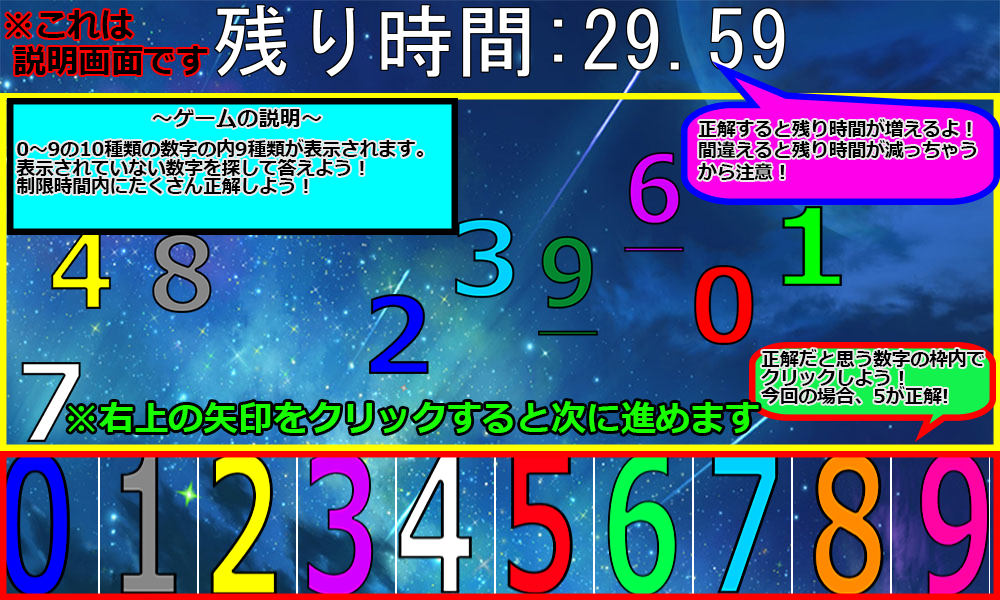
<style>
.page{position:relative;width:1000px;height:600px}
.page>*{position:absolute;margin:0}
.t1{font:32.6px/36px "Meiryo-Bold";color:#000000}
.t2{font:18.7px/18.7px "Meiryo-Bold";color:#000000}
.t3{font:21.3px/32px "Meiryo-Bold";color:#000000}
.t4{font:18.7px/21.3px "Meiryo-Bold";color:#000000}
.t5{font:34.8px "Meiryo-Bold";color:#18ff00}
</style>
<div class="page">
<p class="t1" style="left:6px;top:10px;width:202px;height:65px">※これは<br> 説明画面です</p>
<p class="t2" style="left:16px;top:109px;width:408px;height:85px;text-align:center"><span class="t3">～ゲームの説明～<br></span>0～9の10種類の数字の内9種類が表示されます。<br>表示されていない数字を探して答えよう！<br>制限時間内にたくさん正解しよう！</p>
<p class="t4" style="left:698px;top:119px;width:279px;height:61px">正解すると残り時間が増えるよ！<br>間違えると残り時間が減っちゃう<br>から注意！</p>
<p class="t2" style="left:761px;top:349px;width:223px;height:55px">正解だと思う数字の枠内で<br>クリックしよう！<br>今回の場合、5が正解!</p>
<p class="t5" style="left:68px;top:401px;width:691px;height:33px">※右上の矢印をクリックすると次に進めます</p>
</div>
